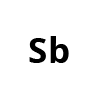
<style>
.page{position:relative;width:100px;height:100px;background:#ffffff}
.page>*{position:absolute;margin:0}
.t1{font:35px "OpenSans-Bold";color:#000000}
</style>
<div class="page">
<p class="t1" style="left:29px;top:36px;width:40px;height:27px">Sb</p>
</div>
